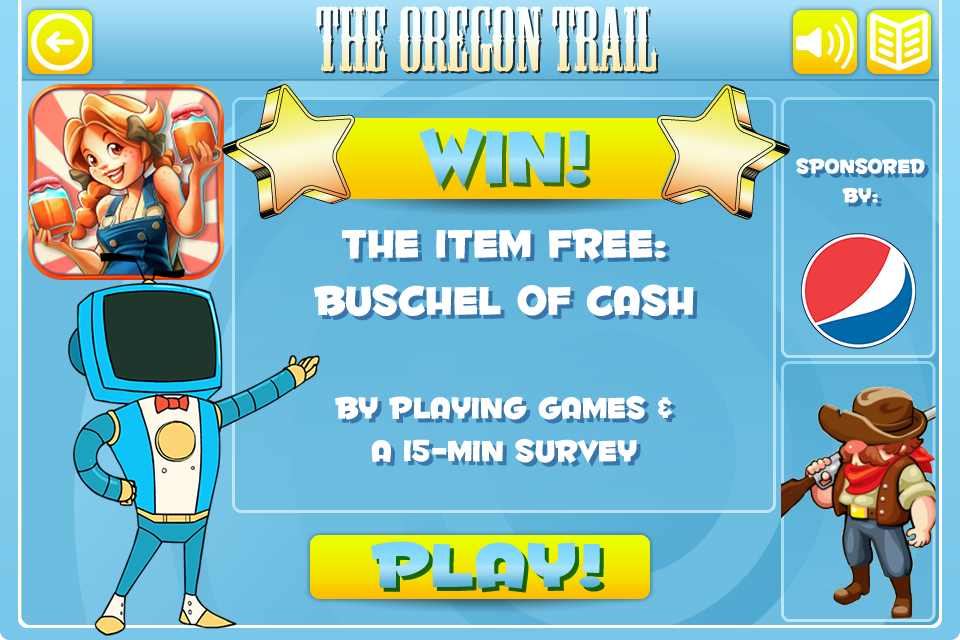
<style>
.page{position:relative;width:960px;height:640px}
.page>*{position:absolute;margin:0}
.t1{font:85.6px "MesquiteStd"}
.t2{font:90.5px "FontdinerdotcomHuggable"}
.t3{font:24px "FontdinerdotcomHuggable";color:#ffffff}
.t4{font:48px "FontdinerdotcomHuggable";color:#ffffff}
.t5{font:36px "FontdinerdotcomHuggable";color:#ffffff}
.t6{font:74.3px "FontdinerdotcomHuggable";scale:1.22 1}
</style>
<div class="page">
<p class="t1" style="left:315px;top:6px;width:342px;height:66px">the Oregon Trail</p>
<p class="t2" style="left:419px;top:128px;width:168px;height:60px">WIN!</p>
<p class="t3" style="left:796px;top:158px;width:129px;height:45px;text-align:center">SPONSORED BY:</p>
<p class="t4" style="left:314px;top:228px;width:380px;height:89px;text-align:center">THE ITEM FREE:<br>BUSCHEL OF CASH</p>
<p class="t5" style="left:335px;top:395px;width:337px;height:68px;text-align:center">By PLAYING GAMES &amp; <br>A 15-Min survey</p>
<p class="t6" style="left:371px;top:541px;width:230px;height:48px">PLAY!</p>
</div>
